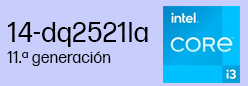
<style>
.page{position:relative;width:248px;height:86px;background:#c9cdfc}
.page>*{position:absolute;margin:0}
.t1{font:28px "FormaDJRMicro-Regular";color:#000000}
.t2{font:16px "FormaDJRMicro-Regular";color:#000000}
</style>
<div class="page">
<p class="t1" style="left:7px;top:22px;width:141px;height:25px">14-dq2521la</p>
<p class="t2" style="left:7px;top:51px;width:104px;height:15px">11.ª generación</p>
</div>
